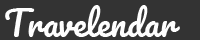
<style>
.page{position:relative;width:200px;height:40px;background:#333333}
.page>*{position:absolute;margin:0}
.t1{font:33.3px "Pacifico-Regular";color:#fefefe}
</style>
<div class="page">
<p class="t1" style="left:5px;top:5px;width:175px;height:32px">Travelendar</p>
</div>
